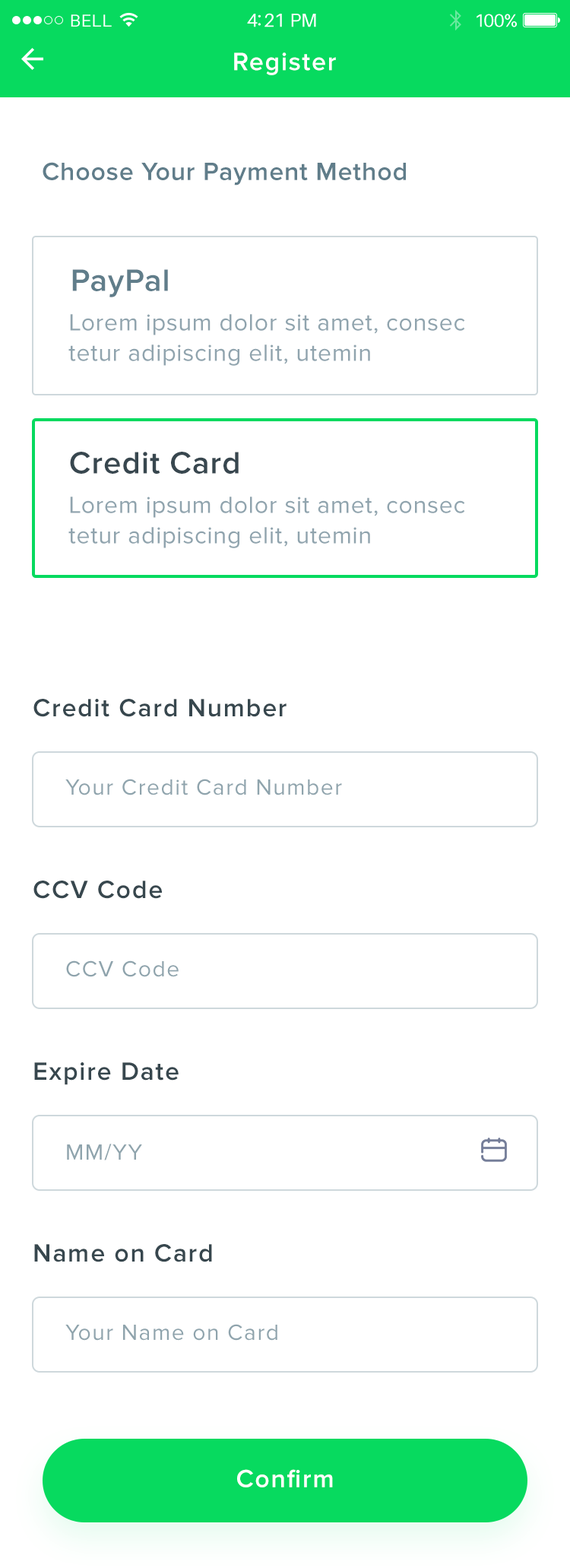
<style>
.page{position:relative;width:570px;height:1568px;background:#ffffff}
.page>*{position:absolute;margin:0}
.t1{font:25.9px "ProximaNova-Semibold";letter-spacing:0.05em;color:#ffffff}
.t2{font:25.9px "ProximaNova-Semibold";letter-spacing:0.025em;color:#607d8a}
.t3{font:31.9px "ProximaNova-Semibold";letter-spacing:0.025em;color:#607d8a}
.t4{font:24.3px/30.4px "ProximaNova-Regular";letter-spacing:0.025em;color:#90a4ae}
.t5{font:31.9px "ProximaNova-Semibold";letter-spacing:0.025em;color:#38474f}
.t6{font:25.8px "ProximaNova-Semibold";letter-spacing:0.05em;color:#37474e}
.t7{font:22.8px "ProximaNova-Regular";letter-spacing:0.05em;color:#8fa4ad}
</style>
<div class="page">
<p class="t1" style="left:234px;top:52px;width:102px;height:23px">Register</p>
<p class="t2" style="left:43px;top:162px;width:363px;height:24px">Choose Your Payment Method</p>
<p class="t3" style="left:72px;top:269px;width:96px;height:28px">PayPal</p>
<p class="t4" style="left:68px;top:314px;width:397px;height:52px">Lorem ipsum dolor sit amet, consec<br>tetur adipiscing elit, utemin</p>
<p class="t5" style="left:70px;top:452px;width:169px;height:22px">Credit Card</p>
<p class="t4" style="left:68px;top:497px;width:397px;height:51px">Lorem ipsum dolor sit amet, consec<br>tetur adipiscing elit, utemin</p>
<p class="t6" style="left:33px;top:699px;width:254px;height:18px">Credit Card Number</p>
<p class="t7" style="left:65px;top:779px;width:277px;height:16px">Your Credit Card Number</p>
<p class="t6" style="left:33px;top:881px;width:129px;height:18px">CCV Code</p>
<p class="t7" style="left:66px;top:960px;width:113px;height:17px">CCV Code</p>
<p class="t6" style="left:34px;top:1062px;width:145px;height:23px">Expire Date</p>
<p class="t7" style="left:67px;top:1144px;width:75px;height:16px">MM/YY</p>
<p class="t6" style="left:34px;top:1244px;width:178px;height:18px">Name on Card</p>
<p class="t7" style="left:65px;top:1324px;width:213px;height:17px">Your Name on Card</p>
<p class="t1" style="left:237px;top:1469px;width:96px;height:18px">Confirm</p>
</div>
